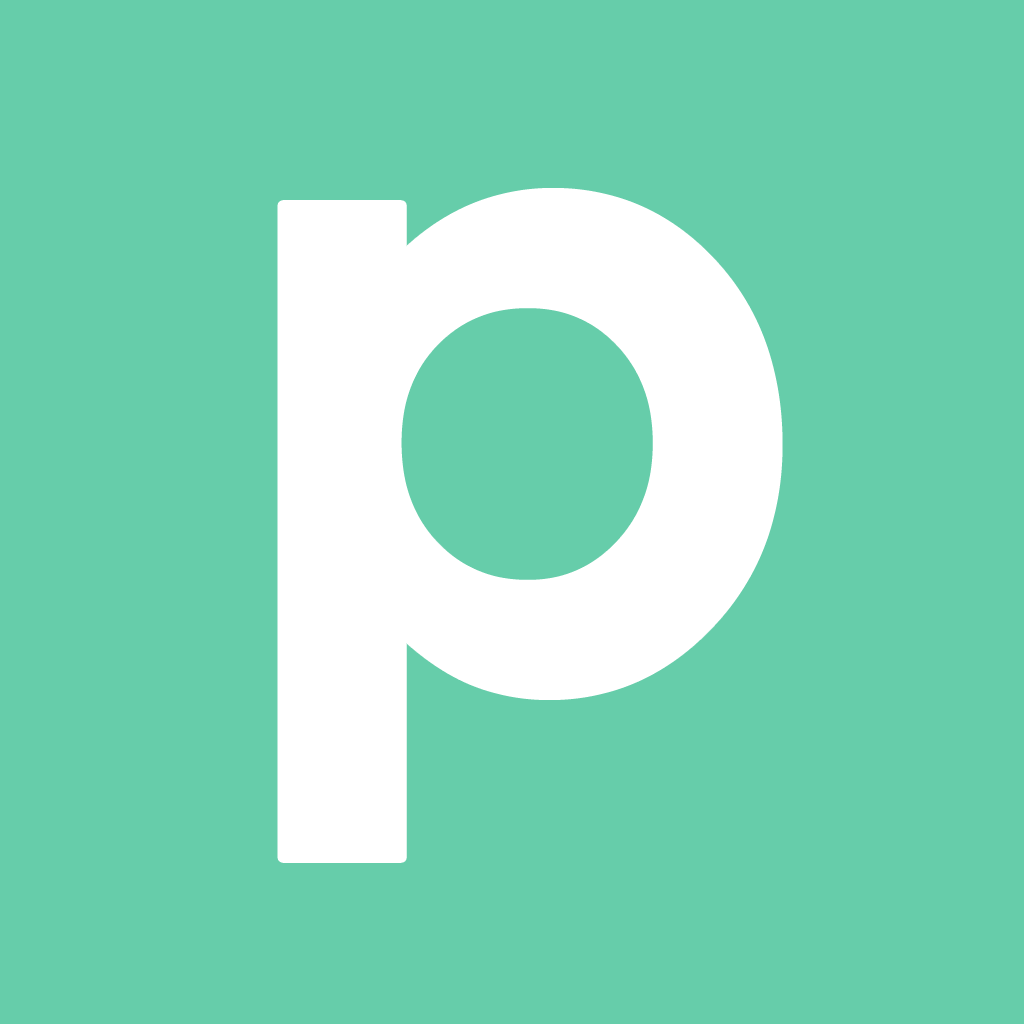
<style>
.page{position:relative;width:1024px;height:1024px;background:#66cdaa}
.page>*{position:absolute;margin:0}
.t1{font:900px "CenturyGothic-Bold";color:#ffffff}
</style>
<div class="page">
<p class="t1" style="left:282px;top:193px;width:496px;height:665px">p</p>
</div>
